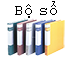
<style>
.page{position:relative;width:71px;height:58px;background:#ffffff}
.page>*{position:absolute;margin:0}
.t1{font:12px "CourierNewPSMT";color:#000000}
</style>
<div class="page">
<p class="t1" style="left:15px;top:1px;width:42px;height:17px">Bộ sổ</p>
</div>
